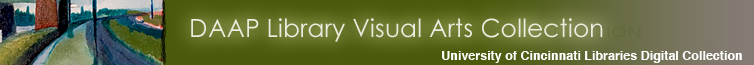
<style>
.page{position:relative;width:754px;height:65px}
.page>*{position:absolute;margin:0}
.t1{font:25px "CenturyGothic";color:#edecdf}
.t2{font:16.7px "BlairMdITCTTMedium";color:#6e7964}
.t3{font:12.5px "Helvetica-Bold";color:#ffffff}
</style>
<div class="page">
<p class="t1" style="left:191px;top:18px;width:412px;height:24px">DAAP Library Visual Arts Collection</p>
<p class="t2" style="left:199px;top:24px;width:442px;height:14px">DAAP Library Visual Arts Collection</p>
<p class="t3" style="left:442px;top:51px;width:300px;height:12px">University of Cincinnati Libraries Digital Collection</p>
</div>
